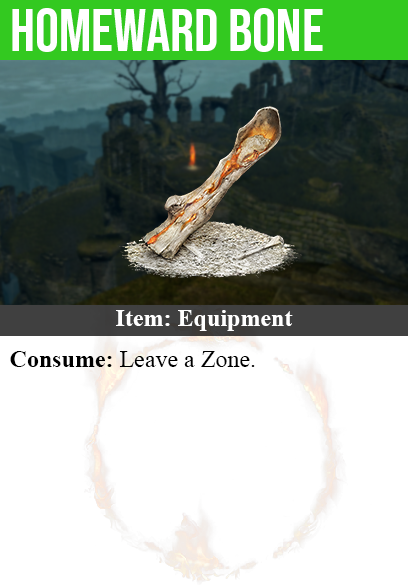
<style>
.page{position:relative;width:408px;height:585px;background:#ffffff}
.page>*{position:absolute;margin:0}
.t1{font:60px "BebasNeue-Regular";color:#ffffff}
.t2{font:24px "TimesNewRomanPS-BoldMT";color:#ffffff}
.t3{font:24px "TimesNewRomanPSMT";color:#000000}
.t4{font:24px "TimesNewRomanPS-BoldMT";color:#000000}
</style>
<div class="page">
<p class="t1" style="left:12px;top:8px;width:311px;height:44px">homeward bone</p>
<p class="t2" style="left:116px;top:310px;width:177px;height:21px">Item: Equipment</p>
<p class="t3" style="left:10px;top:351px;width:245px;height:16px"><span class="t4">Consume:</span> Leave a Zone.</p>
</div>
